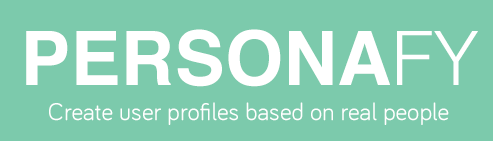
<style>
.page{position:relative;width:493px;height:141px;background:#7ccaac}
.page>*{position:absolute;margin:0}
.t1{font:75px "Helvetica-Bold";color:#ffffff}
.t2{font:75px "Helvetica-Light";color:#ffffff}
.t3{font:25px "Bariol-Regular";color:#ffffff}
</style>
<div class="page">
<p class="t1" style="left:26px;top:29px;width:452px;height:58px">PERSONA<span class="t2">FY</span></p>
<p class="t3" style="left:49px;top:102px;width:400px;height:23px">Create user profiles based on real people</p>
</div>
